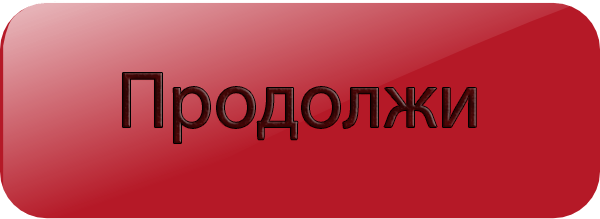
<style>
.page{position:relative;width:600px;height:219px;background:#b51927}
.page>*{position:absolute;margin:0}
.t1{font:80px "MyriadPro-Regular"}
</style>
<div class="page">
<p class="t1" style="left:123px;top:73px;width:353px;height:70px">Продолжи</p>
</div>
